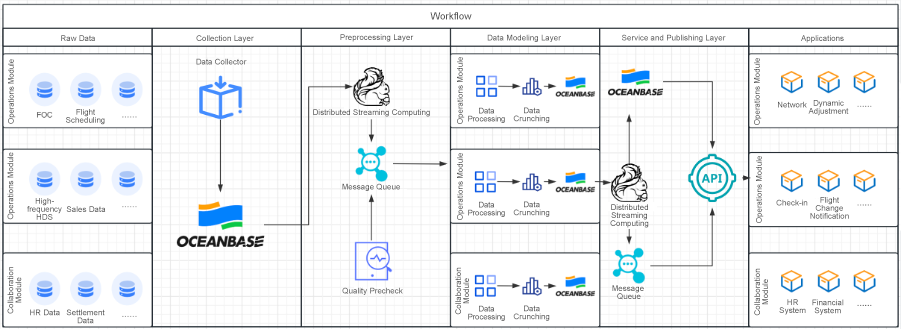
<style>
.page{position:relative;width:902px;height:330px;background:#ffffff}
.page>*{position:absolute;margin:0}
.t1{font:10px "ArialMT";color:#555555}
.t2{font:8px "ArialMT"}
.t3{font:8px "ArialMT";color:#555555}
.t4{font:8px "ArialMT";letter-spacing:-0.02em}
.t5{font:8px/8px "ArialMT"}
.t6{font:8px/8px "ArialMT";color:#555555}
.t7{font:8px/8px "ArialMT";letter-spacing:-0.02em}
</style>
<div class="page">
<p class="t1" style="left:430px;top:12px;width:42px;height:8px">Workflow</p>
<p class="t2" style="left:61px;top:35px;width:34px;height:6px">Raw Data</p>
<p class="t2" style="left:196px;top:35px;width:58px;height:8px">Collection Layer</p>
<p class="t2" style="left:340px;top:34px;width:74px;height:8px">Preprocessing Layer</p>
<p class="t3" style="left:487px;top:34px;width:74px;height:8px">Data Modeling Layer</p>
<p class="t2" style="left:622px;top:34px;width:104px;height:8px">Service and Publishing Layer</p>
<p class="t2" style="left:801px;top:35px;width:43px;height:8px">Applications</p>
<p class="t4" style="left:8px;top:59px;width:8px;height:65px;rotate:-90deg">Operations Module</p>
<p class="t2" style="left:196px;top:58px;width:51px;height:7px">Data Collector</p>
<p class="t3" style="left:457px;top:57px;width:8px;height:67px;rotate:-90deg">Operations Module</p>
<p class="t3" style="left:754px;top:58px;width:8px;height:67px;rotate:-90deg">Operations Module</p>
<p class="t3" style="left:778px;top:101px;width:29px;height:7px">Network</p>
<p class="t5" style="left:808px;top:100px;width:41px;height:16px;text-align:center">Dynamic Adjustment</p>
<p class="t6" style="left:66px;top:109px;width:39px;height:16px;text-align:center">Flight Scheduling</p>
<p class="t2" style="left:313px;top:109px;width:117px;height:8px">Distributed Streaming Computing</p>
<p class="t7" style="left:468px;top:107px;width:37px;height:16px;text-align:center">Data Processing</p>
<p class="t5" style="left:513px;top:107px;width:37px;height:16px;text-align:center">Data Crunching</p>
<p class="t2" style="left:7px;top:152px;width:8px;height:68px;rotate:-90deg">Operations Module</p>
<p class="t3" style="left:457px;top:153px;width:8px;height:67px;rotate:-90deg">Operations Module</p>
<p class="t3" style="left:756px;top:156px;width:8px;height:67px;rotate:-90deg">Operations Module</p>
<p class="t3" style="left:342px;top:183px;width:58px;height:8px">Message Queue</p>
<p class="t6" style="left:27px;top:198px;width:35px;height:22px;text-align:center">High-<br>frequency HDS</p>
<p class="t6" style="left:810px;top:197px;width:39px;height:22px;text-align:center">Flight Change Notification</p>
<p class="t2" style="left:66px;top:206px;width:40px;height:6px">Sales Data</p>
<p class="t7" style="left:468px;top:201px;width:37px;height:16px;text-align:center">Data Processing</p>
<p class="t5" style="left:513px;top:201px;width:37px;height:16px;text-align:center">Data Crunching</p>
<p class="t6" style="left:610px;top:204px;width:39px;height:24px;text-align:center">Distributed Streaming Computing</p>
<p class="t2" style="left:776px;top:199px;width:32px;height:7px">Check-in</p>
<p class="t2" style="left:7px;top:267px;width:15px;height:47px;rotate:-90deg">Collaboration Module</p>
<p class="t2" style="left:455px;top:267px;width:14px;height:48px;rotate:-90deg">Collaboration Module</p>
<p class="t2" style="left:754px;top:268px;width:14px;height:48px;rotate:-90deg">Collaboration Module</p>
<p class="t2" style="left:342px;top:287px;width:61px;height:8px">Quality Precheck</p>
<p class="t6" style="left:612px;top:285px;width:32px;height:15px;text-align:center">Message <br>Queue</p>
<p class="t7" style="left:468px;top:305px;width:37px;height:16px;text-align:center">Data Processing</p>
<p class="t5" style="left:513px;top:305px;width:37px;height:16px;text-align:center">Data Crunching</p>
<p class="t5" style="left:779px;top:299px;width:27px;height:16px;text-align:center">HR System</p>
<p class="t5" style="left:812px;top:299px;width:32px;height:16px;text-align:center">Financial System</p>
<p class="t3" style="left:30px;top:309px;width:30px;height:7px">HR Data</p>
<p class="t5" style="left:66px;top:309px;width:39px;height:15px;text-align:center">Settlement Data</p>
</div>
